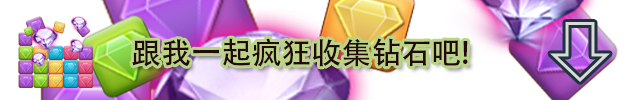
<style>
.page{position:relative;width:640px;height:100px;background:#ffffff}
.page>*{position:absolute;margin:0}
.t1{font:30px "AdobeHeitiStd-Regular";color:#23080f}
</style>
<div class="page">
<p class="t1" style="left:132px;top:38px;width:336px;height:29px">跟我一起疯狂收集钻石吧!</p>
</div>
